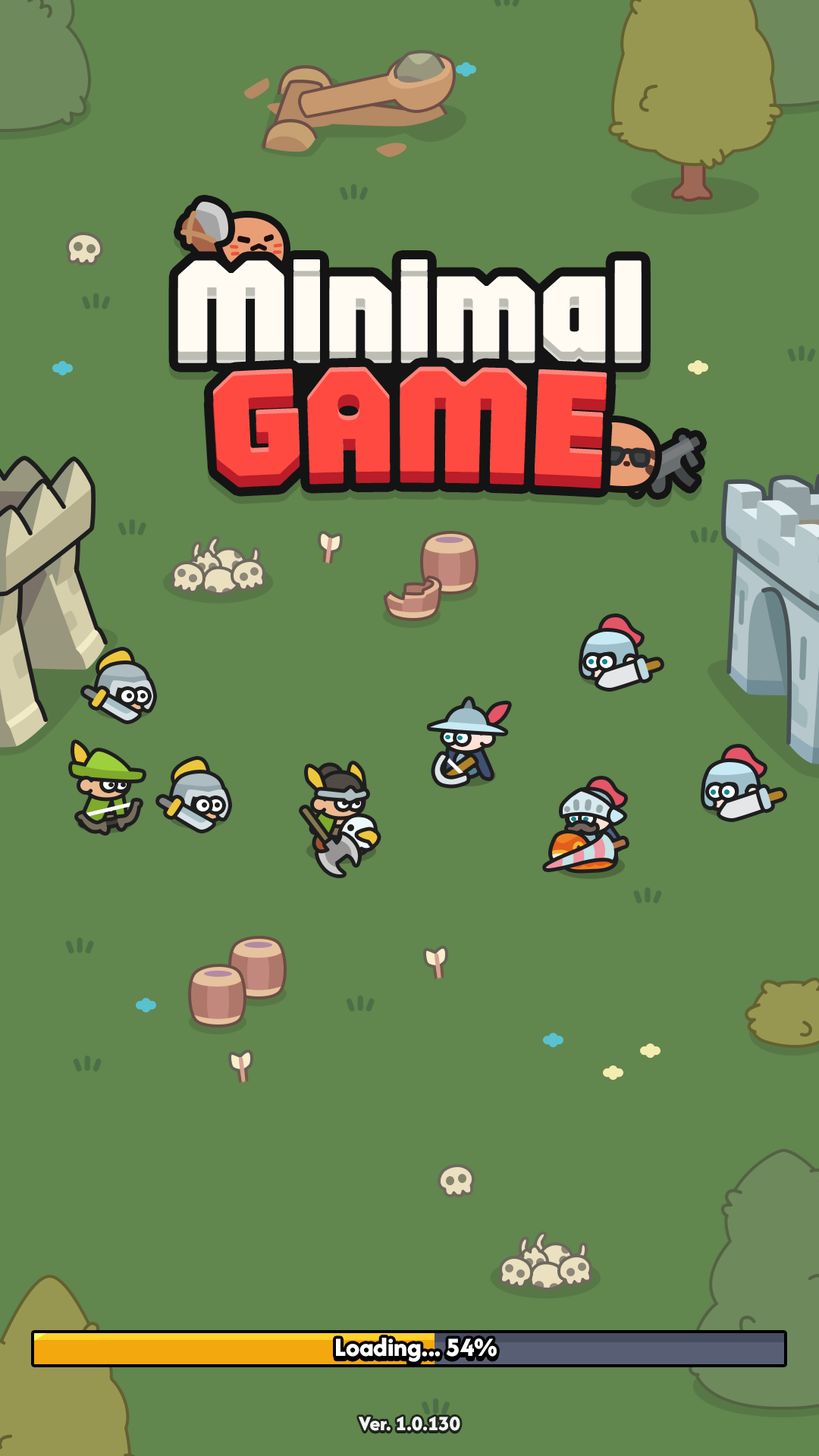
<style>
.page{position:relative;width:819px;height:1456px;background:#61864e}
.page>*{position:absolute;margin:0}
.t1{font:136.5px "Jaro48pt-Regular";color:#fffbf3;scale:1.11 1}
.t2{font:157px "Jaro48pt-Regular";color:#ff4a41;text-transform:uppercase;scale:1.11 1}
.t3{font:27.3px "AfacadFlux-ExtraBold";color:#ffffff}
.t4{font:21.2px "AfacadFlux-ExtraBold";color:#ffffff}
</style>
<div class="page">
<p class="t1" style="left:177px;top:259px;width:465px;height:93px">Minimal</p>
<p class="t1" style="left:177px;top:271px;width:465px;height:92px">Minimal</p>
<p class="t2" style="left:212px;top:378px;width:395px;height:110px">Game</p>
<p class="t2" style="left:212px;top:366px;width:395px;height:111px">Game</p>
<p class="t3" style="left:336px;top:1338px;width:161px;height:24px">Loading... 54%</p>
<p class="t4" style="left:359px;top:1417px;width:101px;height:14px;opacity:0.9">Ver. 1.0.130</p>
</div>
